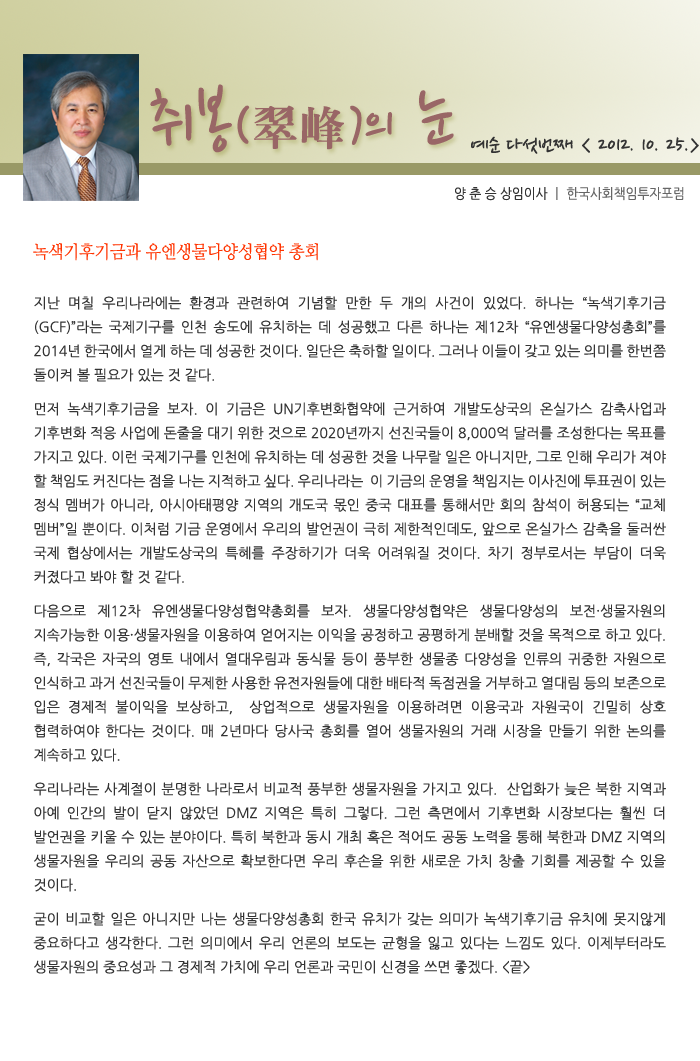
<style>
.page{position:relative;width:700px;height:1061px;background:#ffffff}
.page>*{position:absolute;margin:0}
.t1{font:77.5px "NanumPen";color:#996666}
.t2{font:60px "NanumPen";color:#996666}
.t3{font:48px "H2mjrE";color:#996666}
.t4{font:24px "NanumPen";color:#333333}
.t5{font:14px "NanumGothic";color:#666666;scale:0.9 1}
.t6{font:14px "NanumGothic";color:#333333;scale:0.9 1}
.t7{font:18px "NanumMyeongjo";color:#ff3300;scale:0.9 1}
.t8{font:14px/24px "NanumGothic";color:#333333}
.t9{font:14px/10px "NanumGothic";color:#333333}
</style>
<div class="page">
<p class="t1" style="left:150px;top:84px;width:304px;height:69px">취봉<span class="t2">(</span><span class="t3">翠峰</span><span class="t2">)</span><span class="t2">의</span> 눈</p>
<p class="t4" style="left:471px;top:136px;width:228px;height:18px">예순 다섯번째 &lt; 2012. 10. 25.&gt;</p>
<p class="t5" style="left:455px;top:187px;width:229px;height:14px"><span class="t6">양 춘 승 상임이사 </span>ㅣ 한국사회책임투자포럼</p>
<p class="t7" style="left:33px;top:243px;width:285px;height:18px">녹색기후기금과 유엔생물다양성협약 총회</p>
<p class="t8" style="left:33px;top:296px;width:633px;height:678px;text-align:justify">지난 며칠 우리나라에는 환경과 관련하여 기념할 만한 두 개의 사건이 있었다. 하나는 “녹색기후기금(GCF)”라는 국제기구를 인천 송도에 유치하는 데 성공했고 다른 하나는 제12차 “유엔생물다양성총회”를 2014년 한국에서 열게 하는 데 성공한 것이다. 일단은 축하할 일이다. 그러나 이들이 갖고 있는 의미를 한번쯤 돌이켜 볼 필요가 있는 것 같다.<span class="t9"><br><br>먼저 녹색기후기금을 보</span>자. 이 기금은 UN기후변화협약에 근거하여 개발도상국의 온실가스 감축사업과 기후변화 적응 사업에 돈줄을 대기 위한 것으로 2020년까지 선진국들이 8,000억 달러를 조성한다는 목표를 가지고 있다. 이런 국제기구를 인천에 유치하는 데 성공한 것을 나무랄 일은 아니지만, 그로 인해 우리가 져야 할 책임도 커진다는 점을 나는 지적하고 싶다. 우리나라는  이 기금의 운영을 책임지는 이사진에 투표권이 있는 정식 멤버가 아니라, 아시아태평양 지역의 개도국 몫인 중국 대표를 통해서만 회의 참석이 허용되는 “교체 멤버”일 뿐이다. 이처럼 기금 운영에서 우리의 발언권이 극히 제한적인데도, 앞으로 온실가스 감축을 둘러싼 국제 협상에서는 개발도상국의 특혜를 주장하기가 더욱 어려워질 것이다. 차기 정부로서는 부담이 더욱 커졌다고 봐야 할 것 같다. <span class="t9"><br><br>다음으로 제12차 </span>유엔생물다양성협약총회를 보자. 생물다양성협약은 생물다양성의 보전·생물자원의 지속가능한 이용·생물자원을 이용하여 얻어지는 이익을 공정하고 공평하게 분배할 것을 목적으로 하고 있다. 즉, 각국은 자국의 영토 내에서 열대우림과 동식물 등이 풍부한 생물종 다양성을 인류의 귀중한 자원으로 인식하고 과거 선진국들이 무제한 사용한 유전자원들에 대한 배타적 독점권을 거부하고 열대림 등의 보존으로 입은 경제적 불이익을 보상하고,  상업적으로 생물자원을 이용하려면 이용국과 자원국이 긴밀히 상호 협력하여야 한다는 것이다. 매 2년마다 당사국 총회를 열어 생물자원의 거래 시장을 만들기 위한 논의를 계속하고 있다. <span class="t9"><br><br>우리나라는 사계절</span>이 분명한 나라로서 비교적 풍부한 생물자원을 가지고 있다.  산업화가 늦은 북한 지역과 아예 인간의 발이 닫지 않았던 DMZ 지역은 특히 그렇다. 그런 측면에서 기후변화 시장보다는 훨씬 더 발언권을 키울 수 있는 분야이다. 특히 북한과 동시 개최 혹은 적어도 공동 노력을 통해 북한과 DMZ 지역의 생물자원을 우리의 공동 자산으로 확보한다면 우리 후손을 위한 새로운 가치 창출 기회를 제공할 수 있을 것이다.<span class="t9"><br> <br>굳이 비교할 일은 아니지만 나는 생물다양성총회 한국 유치가 갖는 의미가 녹색기후기금 유치에 </span>못지않게 중요하다고 생각한다. 그런 의미에서 우리 언론의 보도는 균형을 잃고 있다는 느낌도 있다. 이제부터라도 생물자원의 중요성과 그 경제적 가치에 우리 언론과 국민이 신경을 쓰면 좋겠다. &lt;끝&gt;</p>
</div>
